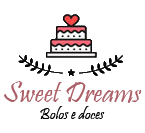
<style>
.page{position:relative;width:145px;height:133px;background:#ffffff}
.page>*{position:absolute;margin:0}
.t1{font:30px "Pristina-Regular";color:#ab5e66}
.t2{font:16px "Pristina-Regular";color:#000000}
</style>
<div class="page">
<p class="t1" style="left:4px;top:81px;width:138px;height:22px">Sweet Dreams</p>
<p class="t2" style="left:40px;top:106px;width:65px;height:13px">Bolos e doces</p>
</div>
